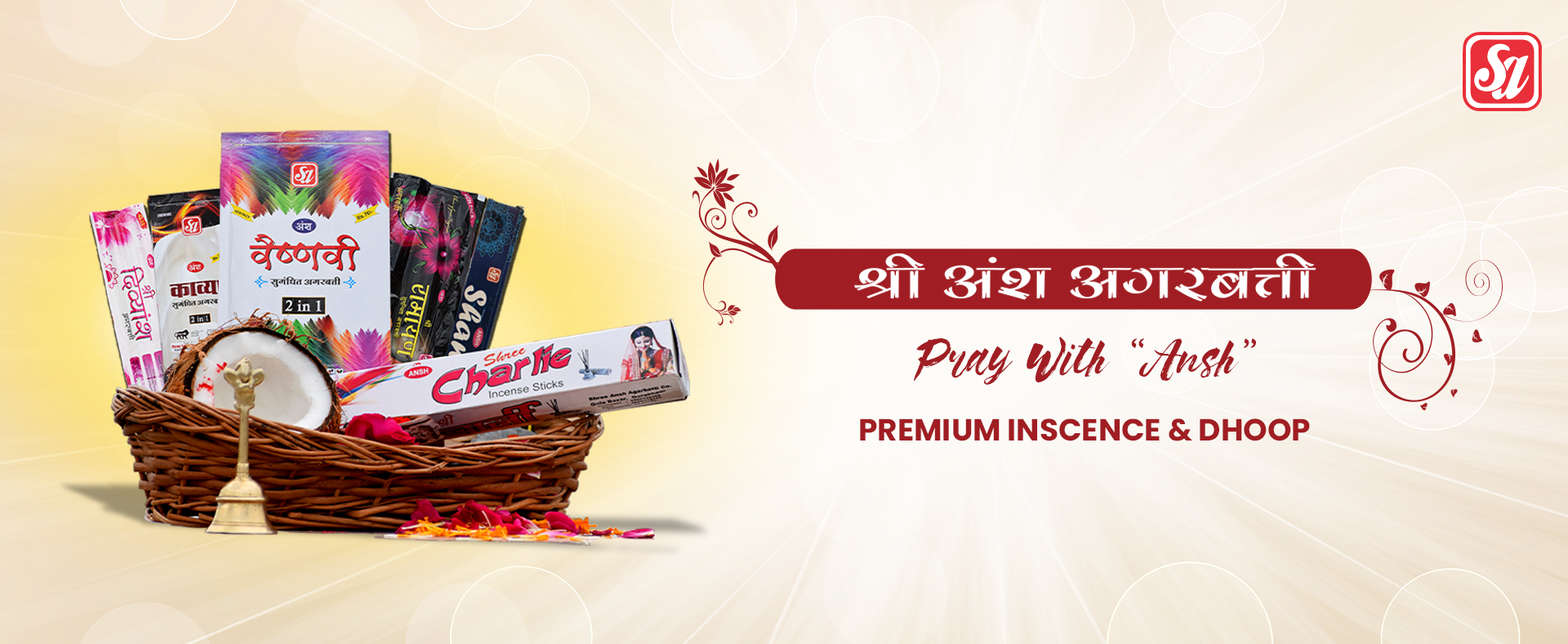
<style>
.page{position:relative;width:1568px;height:644px}
.page>*{position:absolute;margin:0}
.t1{font:60.2px "KrutiDev180";color:#ffffff;scale:1.34 1}
.t2{font:41.3px "SyababFREETESTER";color:#a01e23}
.t3{font:30.6px "Poppins-Bold";color:#a01e23;text-transform:uppercase}
</style>
<div class="page">
<p class="t1" style="left:854px;top:253px;width:462px;height:48px">Jh va'k vxjcÙkh</p>
<p class="t2" style="left:913px;top:336px;width:343px;height:49px">Pray With “Ansh”</p>
<p class="t3" style="left:860px;top:418px;width:450px;height:23px">Premium Inscence &amp; Dhoop</p>
</div>
